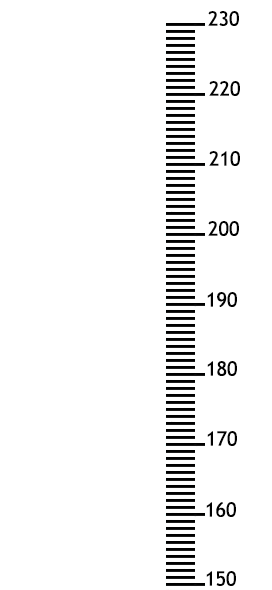
<style>
.page{position:relative;width:272px;height:590px;background:#ffffff}
.page>*{position:absolute;margin:0}
.t1{font:20px "TrebuchetMS";color:#020202}
</style>
<div class="page">
<p class="t1" style="left:208px;top:11px;width:31px;height:15px">230</p>
<p class="t1" style="left:209px;top:81px;width:31px;height:15px">220</p>
<p class="t1" style="left:209px;top:151px;width:31px;height:15px">210</p>
<p class="t1" style="left:208px;top:221px;width:31px;height:15px">200</p>
<p class="t1" style="left:207px;top:292px;width:30px;height:15px">190</p>
<p class="t1" style="left:207px;top:361px;width:30px;height:15px">180</p>
<p class="t1" style="left:207px;top:431px;width:30px;height:15px">170</p>
<p class="t1" style="left:206px;top:502px;width:30px;height:15px">160</p>
<p class="t1" style="left:206px;top:571px;width:30px;height:15px">150</p>
</div>
